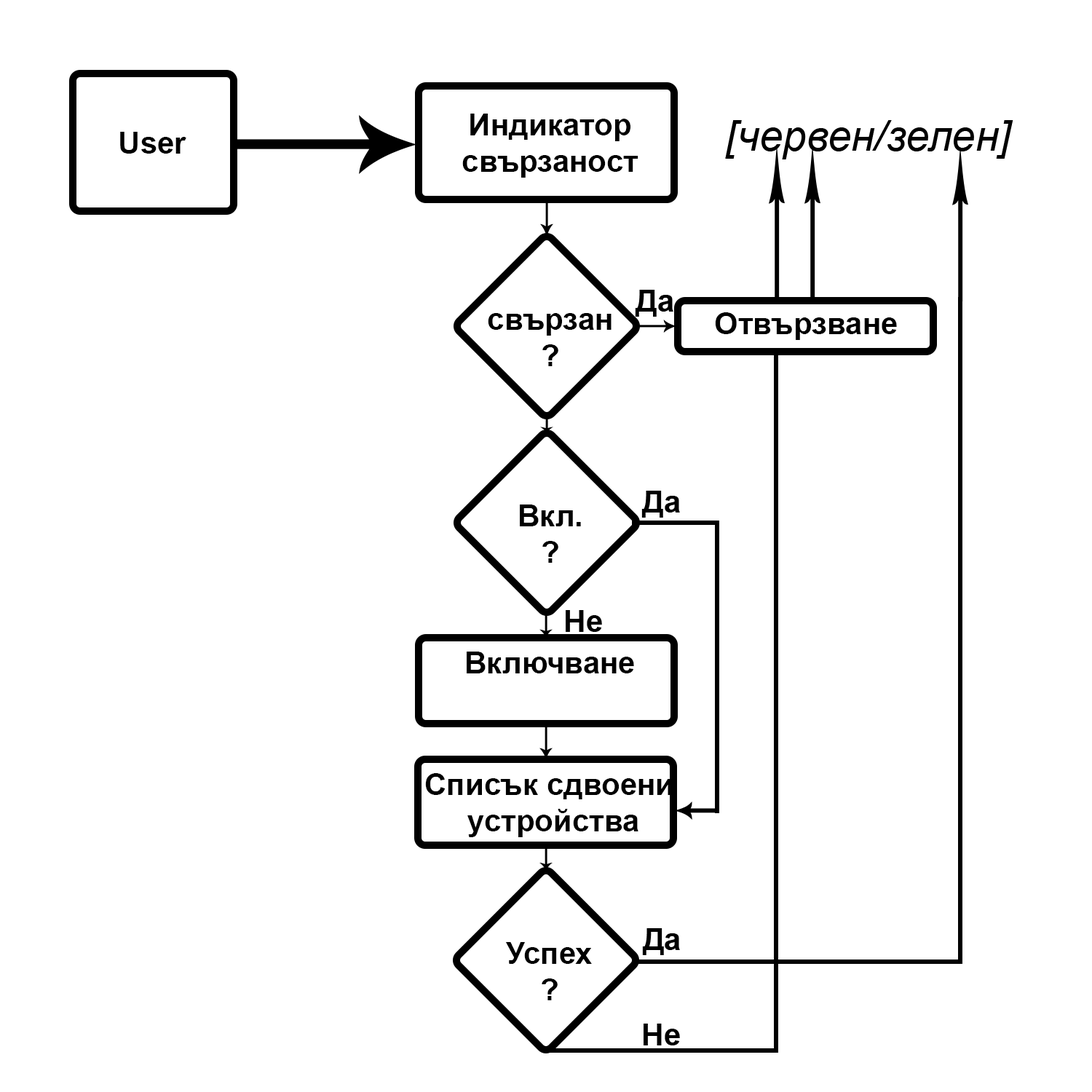
<style>
.page{position:relative;width:1092px;height:1092px;background:#ffffff}
.page>*{position:absolute;margin:0}
.t1{font:30.6px "Arial-BoldMT";color:#000000}
.t2{font:42.5px "Arial-ItalicMT";color:#000000}
</style>
<div class="page">
<p class="t1" style="left:462px;top:114px;width:176px;height:64px;text-align:center">Индикатор<br>свързаност</p>
<p class="t2" style="left:725px;top:120px;width:288px;height:39px">[червен/зелен]</p>
<p class="t1" style="left:120px;top:132px;width:66px;height:22px">User</p>
<p class="t1" style="left:635px;top:290px;width:38px;height:27px">Да</p>
<p class="t1" style="left:488px;top:313px;width:124px;height:53px;text-align:center">свързан<br>?</p>
<p class="t1" style="left:715px;top:312px;width:182px;height:28px">Отвързване</p>
<p class="t1" style="left:641px;top:491px;width:39px;height:27px">Да</p>
<p class="t1" style="left:520px;top:504px;width:61px;height:59px;text-align:center">Вкл.<br>?</p>
<p class="t1" style="left:566px;top:610px;width:36px;height:22px">Не</p>
<p class="t1" style="left:467px;top:652px;width:167px;height:21px">Включване</p>
<p class="t1" style="left:425px;top:773px;width:247px;height:64px;text-align:center">Списък сдвоени<br> устройства</p>
<p class="t1" style="left:642px;top:928px;width:38px;height:27px">Да</p>
<p class="t1" style="left:505px;top:942px;width:87px;height:58px;text-align:center">Успех<br>?</p>
<p class="t1" style="left:644px;top:1024px;width:36px;height:21px">Не</p>
</div>
